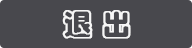
<style>
.page{position:relative;width:192px;height:48px;background:#48484d}
.page>*{position:absolute;margin:0}
.t1{font:30px "STCaiyun";color:#f6f6f6;font-weight:bold}
</style>
<div class="page">
<p class="t1" style="left:62px;top:10px;width:69px;height:29px">退 出</p>
</div>
